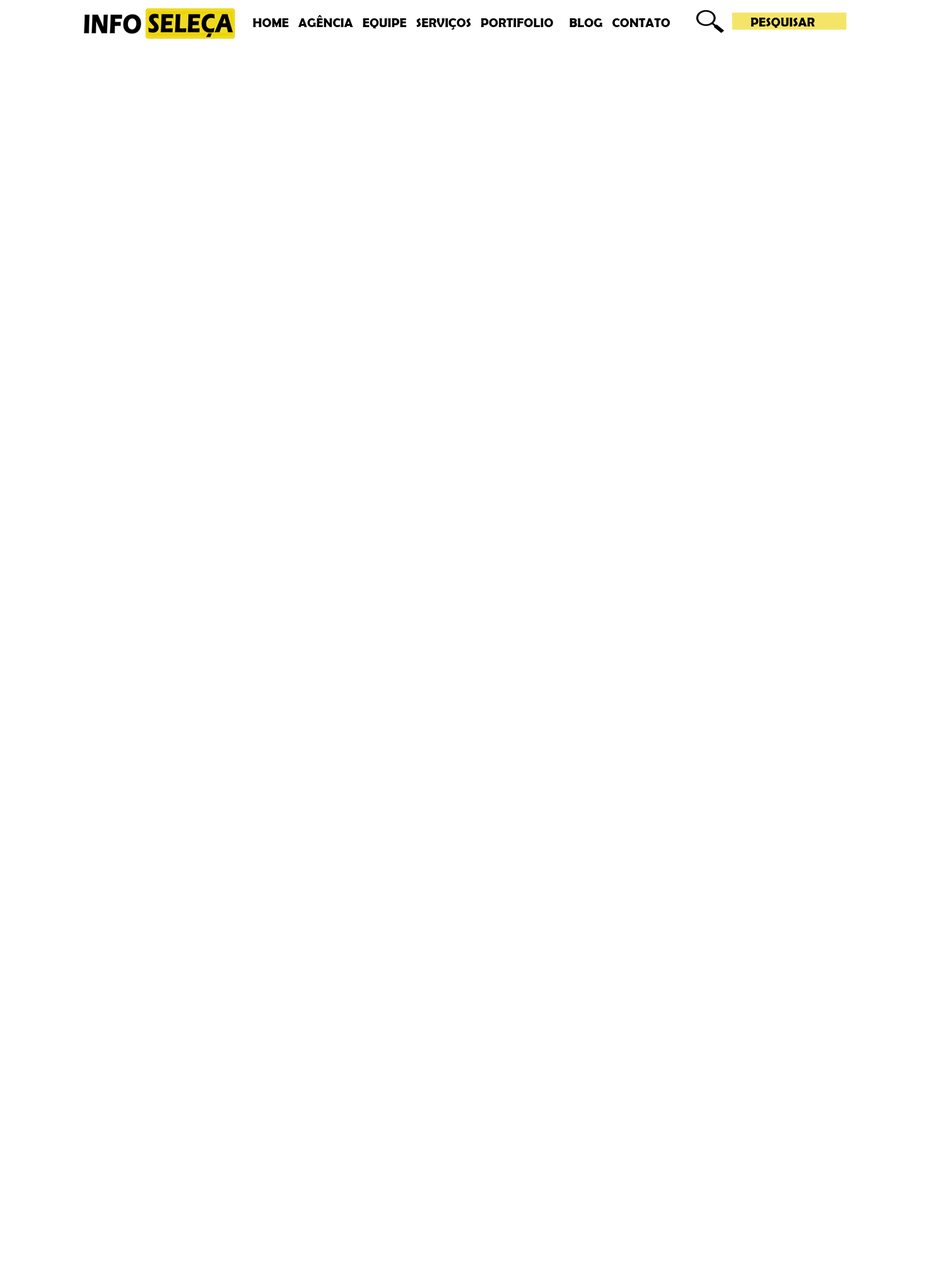
<style>
.page{position:relative;width:946px;height:1261px;background:#ffffff}
.page>*{position:absolute;margin:0}
.t1{font:12.6px "BerlinSansFBDemi-Bold";color:#000000}
</style>
<div class="page">
<p class="t1" style="left:253px;top:15px;width:417px;height:15px">HOME   AGÊNCIA   EQUIPE   SERVIÇOS   PORTIFOLIO     BLOG   CONTATO</p>
<p class="t1" style="left:751px;top:18px;width:64px;height:10px">PESQUISAR</p>
</div>
